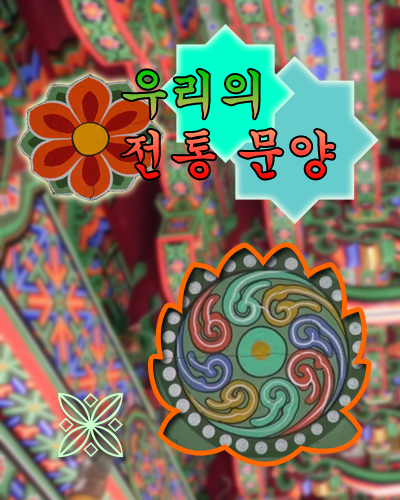
<style>
.page{position:relative;width:400px;height:500px}
.page>*{position:absolute;margin:0}
.t1{font:50px "Gungsuh"}
</style>
<div class="page">
<p class="t1" style="left:121px;top:70px;width:214px;height:109px">우리의 <br>전통 문양</p>
</div>
